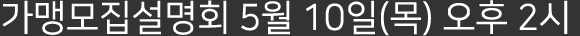
<style>
.page{position:relative;width:580px;height:36px;background:#333333}
.page>*{position:absolute;margin:0}
.t1{font:36px "NanumSquareR";color:#ffffff}
</style>
<div class="page">
<p class="t1" style="left:2px;top:0px;width:566px;height:36px">가맹모집설명회 5월 10일(목) 오후 2시</p>
</div>
